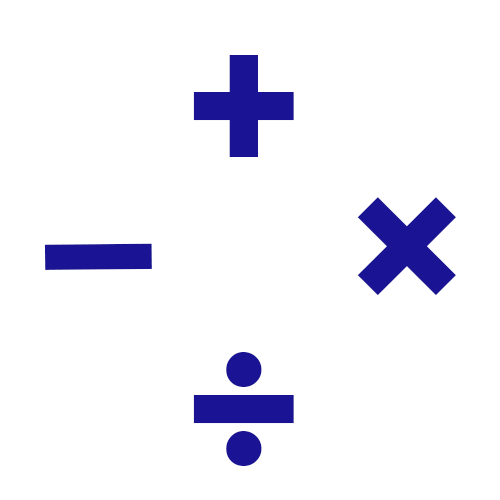
<style>
.page{position:relative;width:500px;height:500px;background:#ffffff}
.page>*{position:absolute;margin:0}
.t1{font:200px "Bauhaus93";color:#1a1495}
.t2{font:400px "Ebrima";color:#1a1495}
</style>
<div class="page">
<p class="t1" style="left:193px;top:55px;width:101px;height:102px">+</p>
<p class="t1" style="left:357px;top:197px;width:99px;height:99px">×</p>
<p class="t2" style="left:44px;top:243px;width:108px;height:27px;rotate:-1deg">-</p>
<p class="t1" style="left:193px;top:352px;width:101px;height:114px">÷</p>
</div>
